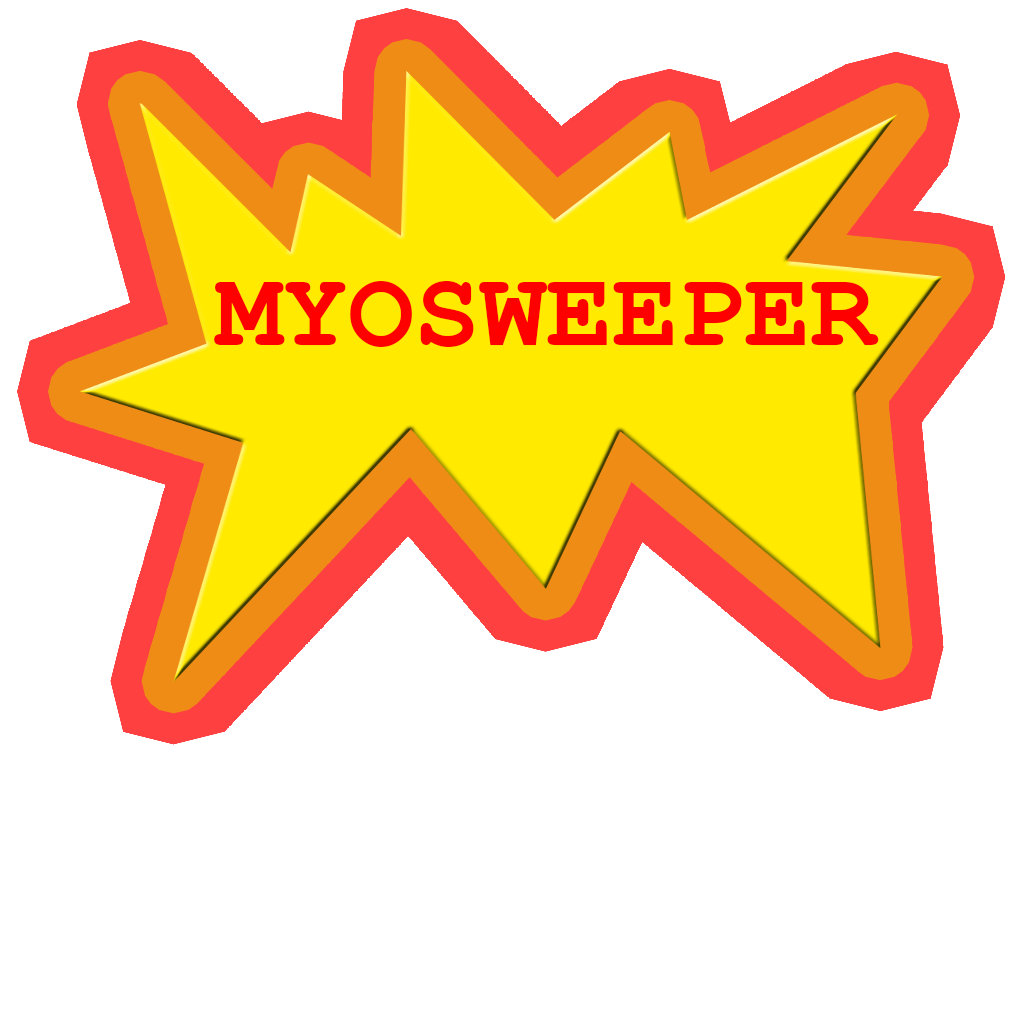
<style>
.page{position:relative;width:1024px;height:1024px;background:#ffffff}
.page>*{position:absolute;margin:0}
.t1{font:110px "CourierNewPS-BoldMT";color:#ff0000}
</style>
<div class="page">
<p class="t1" style="left:214px;top:281px;width:665px;height:66px">MYOSWEEPER</p>
</div>
